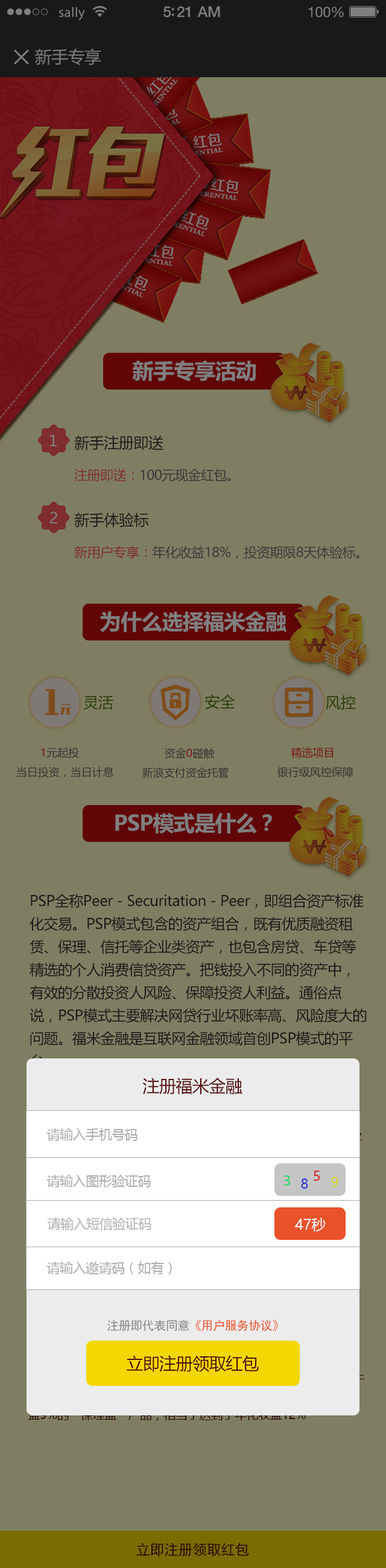
<style>
.page{position:relative;width:386px;height:1568px;background:#7f7e63}
.page>*{position:absolute;margin:0}
.t1{font:13.9px "MyriadPro-Regular";letter-spacing:0.02em;color:#7f7f7f}
.t2{font:15.1px "HelveticaNeue-Medium";letter-spacing:-0.02em;color:#7f7f7f}
.t3{font:14.5px "HelveticaNeue";letter-spacing:-0.02em;color:#7f7f7f}
.t4{font:16.9px "MicrosoftYaHei";letter-spacing:-0.02em;color:#797979}
.t5{font:21.1px "MicrosoftYaHei-Bold";letter-spacing:-0.02em;color:#7f7f7f}
.t6{font:15.1px "MicrosoftYaHei";letter-spacing:-0.02em;color:#7f7f7f}
.t7{font:15.1px "MicrosoftYaHei";letter-spacing:-0.02em;color:#191919}
.t8{font:13.3px "MicrosoftYaHei";letter-spacing:-0.02em}
.t9{font:13.3px "MicrosoftYaHei";letter-spacing:-0.02em;color:#393939}
.t10{font:15.1px "MicrosoftYaHei";color:#2b3d03}
.t11{font:10.9px "MicrosoftYaHei";color:#313131}
.t12{font:10.9px "MicrosoftYaHei";color:#780d0d}
.t13{font:14.5px/22.9px "MicrosoftYaHei";letter-spacing:-0.02em;color:#191919}
.t14{font:16.9px "MicrosoftYaHei";letter-spacing:-0.02em;color:#550d0d}
.t15{font:13.3px "MicrosoftYaHei";letter-spacing:-0.02em;color:#acacac}
.t16{font:13.3px "MicrosoftYaHei";letter-spacing:-0.02em;color:#28d469}
.t17{font:13.3px "MicrosoftYaHei";letter-spacing:-0.02em;color:#2830d4}
.t18{font:13.3px "MicrosoftYaHei";letter-spacing:-0.02em;color:#d42828}
.t19{font:13.3px "MicrosoftYaHei";letter-spacing:-0.02em;color:#d2d428}
.t20{font:14.5px "MicrosoftYaHei";letter-spacing:-0.02em;color:#ffffff}
.t21{font:12.1px "SimHei";letter-spacing:-0.02em;color:#ea522b}
.t22{font:12.1px "SimHei";letter-spacing:-0.02em;color:#878787}
.t23{font:14.5px "SimHei";letter-spacing:-0.02em;color:#2a0606}
</style>
<div class="page">
<p class="t1" style="left:59px;top:7px;width:26px;height:14px">sally</p>
<p class="t2" style="left:163px;top:6px;width:57px;height:11px">5:21 AM</p>
<p class="t3" style="left:308px;top:7px;width:36px;height:10px">100%</p>
<p class="t4" style="left:35px;top:48px;width:66px;height:17px">新手专享</p>
<p class="t5" style="left:132px;top:361px;width:124px;height:21px">新手专享活动</p>
<p class="t6" style="left:49px;top:434px;width:8px;height:12px">１</p>
<p class="t7" style="left:74px;top:435px;width:89px;height:15px">新手注册即送</p>
<p class="t8" style="left:74px;top:469px;width:157px;height:13px">注册即送：100元现金红包。</p>
<p class="t6" style="left:50px;top:511px;width:7px;height:12px">2</p>
<p class="t7" style="left:74px;top:513px;width:75px;height:15px">新手体验标</p>
<p class="t9" style="left:74px;top:546px;width:285px;height:13px">新用户专享：年化收益18%，投资期限8天体验标。</p>
<p class="t5" style="left:100px;top:611px;width:186px;height:21px">为什么选择福米金融</p>
<p class="t10" style="left:83px;top:695px;width:30px;height:15px">灵活</p>
<p class="t10" style="left:205px;top:694px;width:30px;height:15px">安全</p>
<p class="t10" style="left:326px;top:695px;width:30px;height:15px">风控</p>
<p class="t11" style="left:41px;top:747px;width:39px;height:11px">1元起投</p>
<p class="t11" style="left:165px;top:748px;width:49px;height:11px">资金0碰触</p>
<p class="t12" style="left:291px;top:747px;width:42px;height:11px">精选项目</p>
<p class="t11" style="left:16px;top:767px;width:98px;height:10px">当日投资，当日计息</p>
<p class="t11" style="left:142px;top:767px;width:87px;height:11px">新浪支付资金托管</p>
<p class="t11" style="left:277px;top:767px;width:76px;height:10px">银行级风控保障</p>
<p class="t5" style="left:115px;top:812px;width:157px;height:22px">PSP模式是什么？</p>
<p class="t13" style="left:30px;top:894px;width:337px;height:175px">PSP全称Peer - Securitation - Peer，即组合资产标准化交易。PSP模式包含的资产组合，既有优质融资租赁、保理、信托等企业类资产，也包含房贷、车贷等精选的个人消费信贷资产。把钱投入不同的资产中，有效的分散投资人风险、保障投资人利益。通俗点说，PSP模式主要解决网贷行业坏账率高、风险度大的问题。福米金融是互联网金融领域首创PSP模式的平台。</p>
<p class="t14" style="left:142px;top:1078px;width:100px;height:17px">注册福米金融</p>
<p class="t15" style="left:46px;top:1128px;width:92px;height:13px">请输入手机号码</p>
<p class="t15" style="left:46px;top:1175px;width:105px;height:12px">请输入图形验证码</p>
<p class="t16" style="left:284px;top:1175px;width:7px;height:11px">3</p>
<p class="t17" style="left:301px;top:1178px;width:7px;height:11px">8</p>
<p class="t18" style="left:314px;top:1171px;width:6px;height:10px">5</p>
<p class="t19" style="left:331px;top:1177px;width:7px;height:10px">9</p>
<p class="t15" style="left:47px;top:1217px;width:104px;height:13px">请输入短信验证码</p>
<p class="t20" style="left:295px;top:1218px;width:31px;height:13px">47秒</p>
<p class="t15" style="left:46px;top:1261px;width:126px;height:13px">请输入邀请码（如有）</p>
<p class="t21" style="left:107px;top:1320px;width:172px;height:12px"><span class="t22">注册即代表同意</span>《用户服务协议》</p>
<p class="t14" style="left:127px;top:1355px;width:132px;height:17px">立即注册领取红包</p>
<p class="t23" style="left:136px;top:1543px;width:113px;height:14px">立即注册领取红包</p>
</div>
